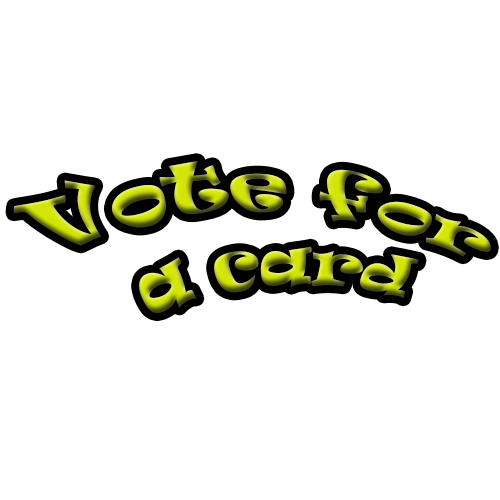
<style>
.page{position:relative;width:500px;height:500px;background:#ffffff}
.page>*{position:absolute;margin:0}
.t1{font:56.9px "Ravie"}
</style>
<div class="page">
<p class="t1" style="left:13px;top:161px;width:478px;height:152px;text-align:center">Vote for <br>a card</p>
</div>
